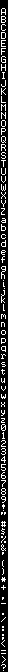
<style>
.page{position:relative;width:8px;height:672px;background:#000000}
.page>*{position:absolute;margin:0}
.t1{font:8px/8px "Terminal";color:#ffffff}
</style>
<div class="page">
<p class="t1" style="left:1px;top:8px;width:5px;height:663px">ABCDEFGHIJKLMNOPQRSTUVWXYZabcdefghijklmnopqrstuvwxyz0123456789!”#$%&amp;’()*+,-./:;&lt;=&gt;?<br>!!</p>
</div>
